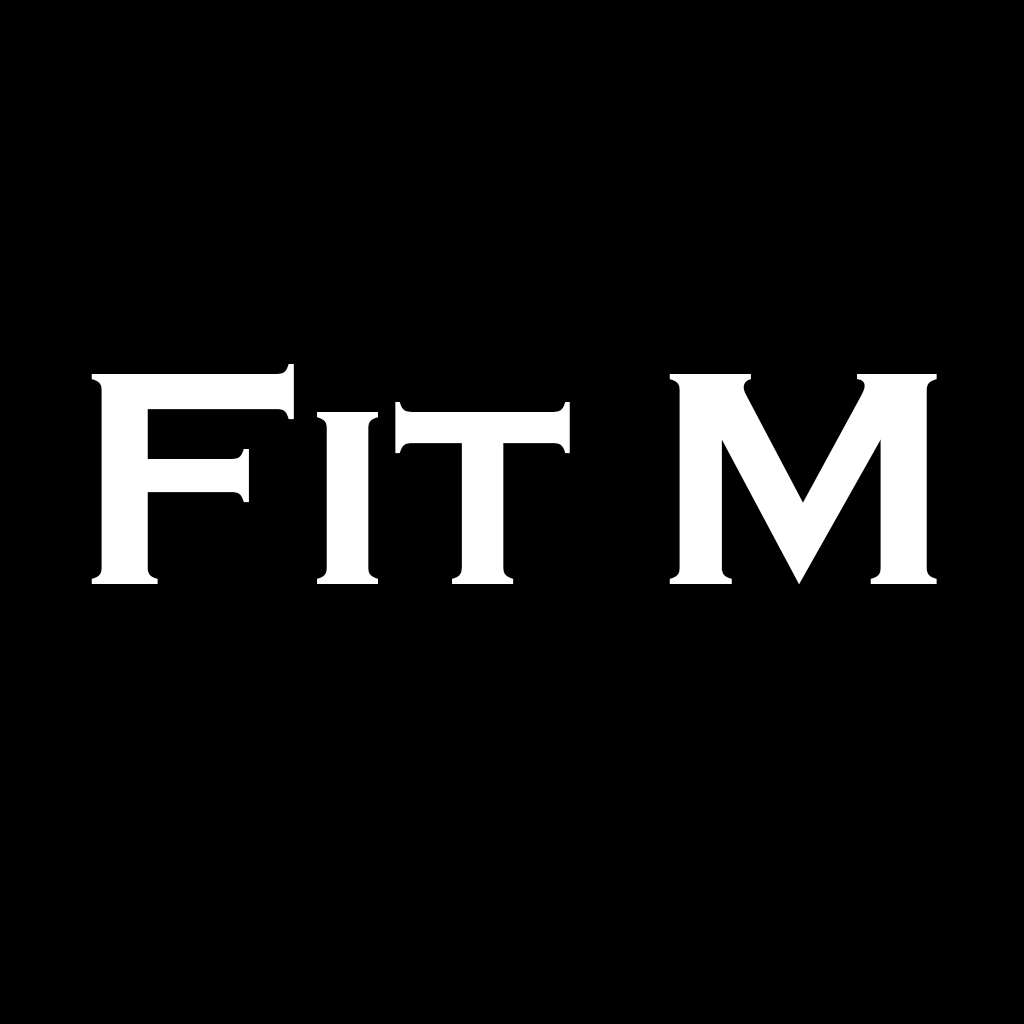
<style>
.page{position:relative;width:1024px;height:1024px;background:#000000}
.page>*{position:absolute;margin:0}
.t1{font:314.9px "CopperplateGothic-Bold";color:#ffffff}
</style>
<div class="page">
<p class="t1" style="left:91px;top:364px;width:846px;height:220px">Fit M</p>
</div>
